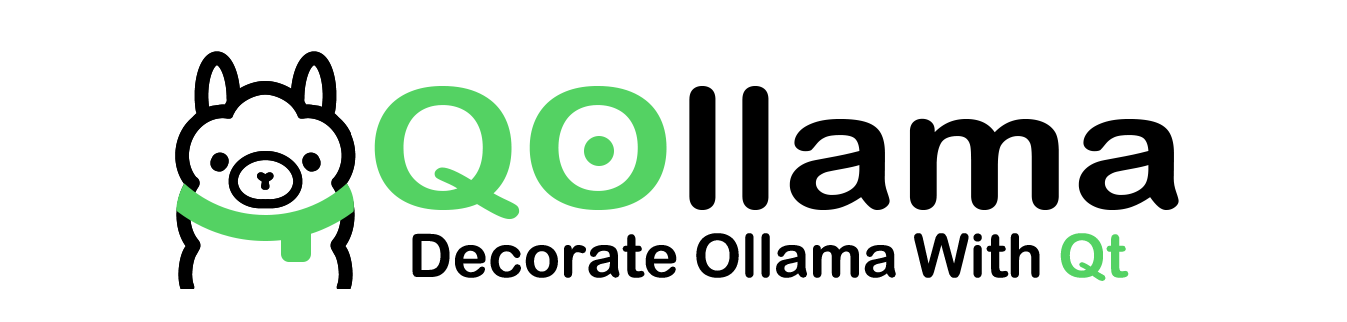
<style>
.page{position:relative;width:1347px;height:322px;background:#ffffff}
.page>*{position:absolute;margin:0}
.t1{font:167.8px "ArialRoundedMTBold";color:#000000;scale:1.17 1}
.t2{font:167.8px "ArialRoundedMTBold";color:#54d263;scale:1.17 1}
.t3{font:60px "ArialRoundedMTBold";color:#000000}
.t4{font:60px "ArialRoundedMTBold";color:#54d263}
</style>
<div class="page">
<p class="t1" style="left:374px;top:86px;width:805px;height:134px"><span class="t2">QO</span>llama</p>
<p class="t3" style="left:412px;top:233px;width:717px;height:48px">Decorate Ollama With <span class="t4">Qt</span></p>
</div>
